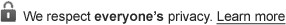
<style>
.page{position:relative;width:286px;height:25px;background:#ffffff}
.page>*{position:absolute;margin:0}
.t1{font:13.4px "ArialMT";color:#282828}
.t2{font:13.4px "Arial-BoldMT";color:#282828}
.t3{font:13.4px "ArialMT";color:#282828;text-decoration:underline}
</style>
<div class="page">
<p class="t1" style="left:23px;top:11px;width:263px;height:14px">We respect <span class="t2">everyone’s</span> privacy. <span class="t3">Learn more</span></p>
</div>
